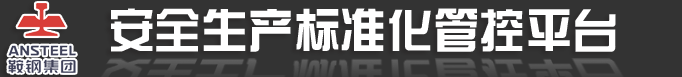
<style>
.page{position:relative;width:682px;height:77px;background:#333333}
.page>*{position:absolute;margin:0}
.t1{font:47.5px "JZhongYi";color:#ffffff}
</style>
<div class="page">
<p class="t1" style="left:111px;top:8px;width:505px;height:44px">安全生产标准化管控平台</p>
</div>
